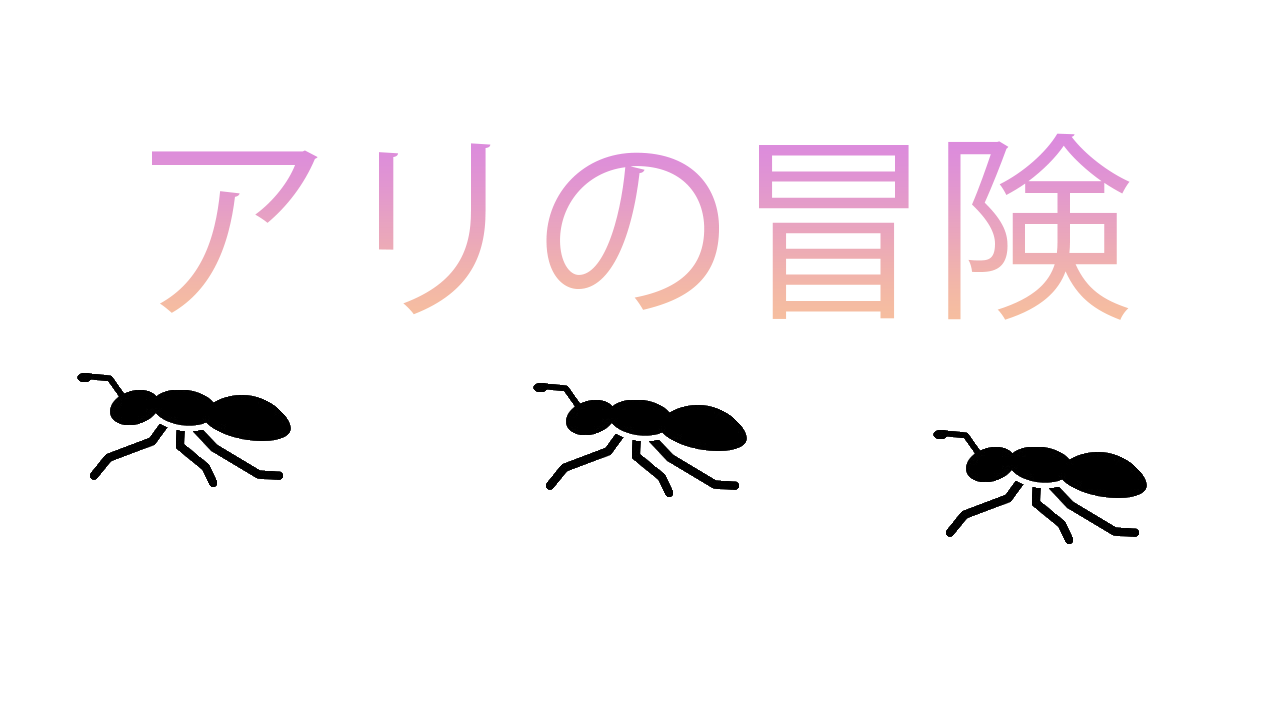
<style>
.page{position:relative;width:1280px;height:720px;background:#ffffff}
.page>*{position:absolute;margin:0}
.t1{font:200px "KozGoPr6N-Regular"}
</style>
<div class="page">
<p class="t1" style="left:152px;top:133px;width:978px;height:187px">アリの冒険</p>
</div>
